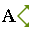
<style>
.page{position:relative;width:32px;height:32px;background:#ffffff}
.page>*{position:absolute;margin:0}
.t1{font:19px "BaskOldFace";color:#000000}
</style>
<div class="page">
<p class="t1" style="left:2px;top:9px;width:14px;height:13px">A</p>
</div>
